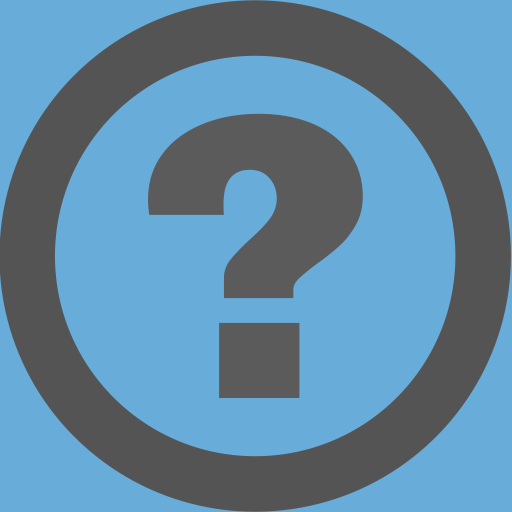
<style>
.page{position:relative;width:512px;height:512px;background:#68acda}
.page>*{position:absolute;margin:0}
.t1{font:406px "ArchivoBlack-Regular";color:#5b5b5b}
</style>
<div class="page">
<p class="t1" style="left:147px;top:113px;width:217px;height:286px">?</p>
</div>
